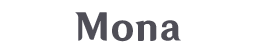
<style>
.page{position:relative;width:256px;height:56px;background:#ffffff}
.page>*{position:absolute;margin:0}
.t1{font:36px "HYWenHei-HEW";color:#4f4e57}
</style>
<div class="page">
<p class="t1" style="left:75px;top:12px;width:106px;height:30px">Mona</p>
</div>
